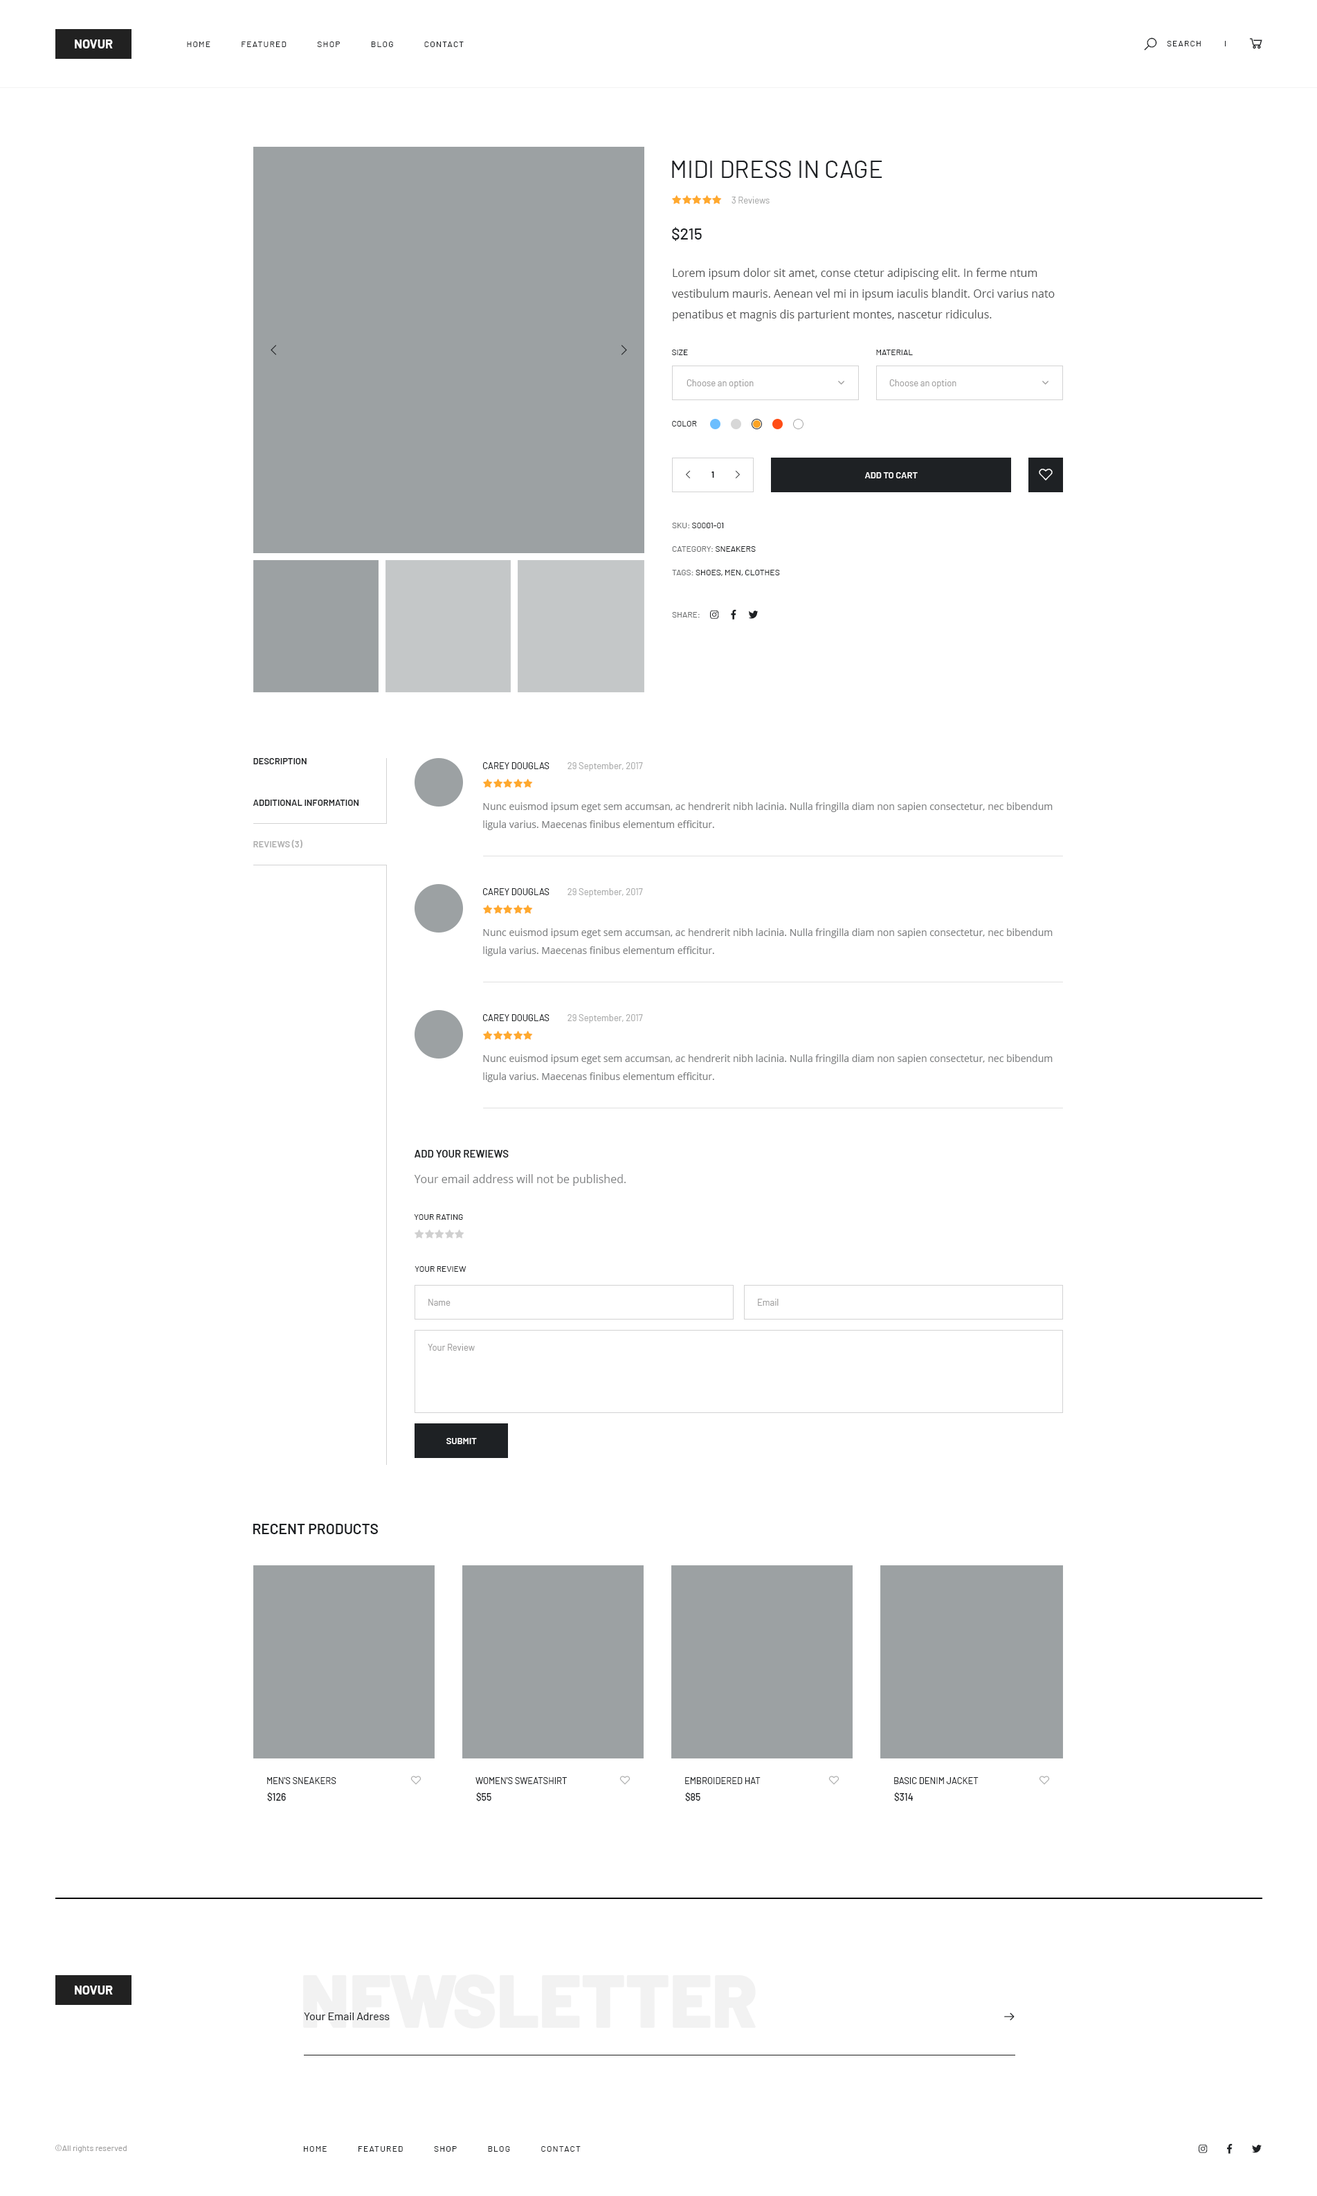
<style>
.page{position:relative;width:1317px;height:2196px;background:#ffffff}
.page>*{position:absolute;margin:0}
.t1{font:12.5px "Barlow-Bold";color:#fefefe;text-transform:uppercase}
.t2{font:8.3px "Barlow-Regular";letter-spacing:0.1em;color:#1e2124;text-transform:uppercase}
.t3{font:24.2px "Barlow-Regular";color:#1e2124;text-transform:uppercase}
.t4{font:9px "Barlow-Regular";color:#aaabab}
.t5{font:15.9px "Barlow-Medium";color:#1e2124}
.t6{font:11.1px/20.8px "OpenSans";color:#535455}
.t7{font:8.3px "Barlow-Regular";color:#1e2124;text-transform:uppercase}
.t8{font:9px "Barlow-Regular";color:#9e9d9d}
.t9{font:8.3px "Barlow-Bold";color:#1e2124;text-transform:uppercase}
.t10{font:9px "Barlow-SemiBold";color:#ffffff;text-transform:uppercase}
.t11{font:8.3px/23.5px "Barlow-Regular";color:#1e2124;text-transform:uppercase}
.t12{font:8.3px/23.5px "Barlow-Regular";color:#6e7071;text-transform:uppercase}
.t13{font:8.3px "Barlow-Regular";color:#6e7071;text-transform:uppercase}
.t14{font:9px/41.5px "Barlow-SemiBold";color:#1e2124;text-transform:uppercase}
.t15{font:9px/41.5px "Barlow-SemiBold";color:#aeaeae;text-transform:uppercase}
.t16{font:9px "Barlow-Regular";color:#1e2124;text-transform:uppercase}
.t17{font:9.7px/18px "OpenSans";color:#7f8182}
.t18{font:10.4px "Barlow-SemiBold";color:#1e2124;text-transform:uppercase}
.t19{font:11.1px "OpenSans";color:#7f8182}
.t20{font:14.5px "Barlow-SemiBold";color:#1e2124;text-transform:uppercase}
.t21{font:9.7px "Barlow-Medium";color:#1e2124}
.t22{font:74.1px "Barlow-Black";color:#f2f2f2}
.t23{font:11.1px "Barlow-Regular";color:#1e2124}
.t24{font:8.3px "Barlow-Regular";color:#9e9d9d}
</style>
<div class="page">
<p class="t1" style="left:75px;top:39px;width:38px;height:9px">novur</p>
<p class="t2" style="left:187px;top:42px;width:277px;height:5px">Home            Featured            Shop            Blog            Contact</p>
<p class="t2" style="left:1167px;top:41px;width:34px;height:5px">Search</p>
<p class="t3" style="left:672px;top:161px;width:211px;height:17px">Midi Dress in Cage</p>
<p class="t4" style="left:732px;top:197px;width:38px;height:7px">3 Reviews</p>
<p class="t5" style="left:672px;top:227px;width:30px;height:14px">$215</p>
<p class="t6" style="left:672px;top:268px;width:383px;height:53px">Lorem ipsum dolor sit amet, conse ctetur adipiscing elit. In ferme ntum    vestibulum mauris. Aenean vel mi in ipsum iaculis blandit. Orci varius nato penatibus et magnis dis parturient montes, nascetur ridiculus.</p>
<p class="t7" style="left:672px;top:350px;width:16px;height:5px">Size</p>
<p class="t7" style="left:876px;top:350px;width:37px;height:5px">Material</p>
<p class="t8" style="left:687px;top:379px;width:67px;height:9px">Choose an option</p>
<p class="t8" style="left:890px;top:379px;width:67px;height:9px">Choose an option</p>
<p class="t7" style="left:672px;top:421px;width:25px;height:5px">Color</p>
<p class="t9" style="left:712px;top:471px;width:2px;height:7px">1</p>
<p class="t10" style="left:865px;top:472px;width:53px;height:6px">Add to cart</p>
<p class="t11" style="left:672px;top:523px;width:108px;height:53px"><span class="t12">SKU: </span>S0001-01<br><span class="t12">Category: </span>Sneakers<br><span class="t12">Tags: </span>Shoes, Men, Clothes</p>
<p class="t13" style="left:672px;top:612px;width:28px;height:6px">Share:</p>
<p class="t14" style="left:253px;top:758px;width:106px;height:90px">Description<br>additional information<br><span class="t15">Reviews (3)</span></p>
<p class="t16" style="left:483px;top:762px;width:67px;height:7px">Carey Douglas</p>
<p class="t4" style="left:568px;top:762px;width:75px;height:9px">29 September, 2017</p>
<p class="t17" style="left:483px;top:802px;width:570px;height:28px">Nunc euismod ipsum eget sem accumsan, ac hendrerit nibh lacinia. Nulla fringilla diam non sapien consectetur, nec bibendum ligula varius. Maecenas finibus elementum efficitur.</p>
<p class="t16" style="left:483px;top:888px;width:67px;height:7px">Carey Douglas</p>
<p class="t4" style="left:568px;top:888px;width:75px;height:9px">29 September, 2017</p>
<p class="t17" style="left:483px;top:928px;width:570px;height:28px">Nunc euismod ipsum eget sem accumsan, ac hendrerit nibh lacinia. Nulla fringilla diam non sapien consectetur, nec bibendum ligula varius. Maecenas finibus elementum efficitur.</p>
<p class="t16" style="left:483px;top:1014px;width:67px;height:7px">Carey Douglas</p>
<p class="t4" style="left:568px;top:1014px;width:75px;height:9px">29 September, 2017</p>
<p class="t17" style="left:483px;top:1054px;width:570px;height:28px">Nunc euismod ipsum eget sem accumsan, ac hendrerit nibh lacinia. Nulla fringilla diam non sapien consectetur, nec bibendum ligula varius. Maecenas finibus elementum efficitur.</p>
<p class="t18" style="left:415px;top:1150px;width:94px;height:8px">Add Your Rewiews</p>
<p class="t19" style="left:414px;top:1174px;width:212px;height:12px">Your email address will not be published.</p>
<p class="t7" style="left:414px;top:1214px;width:49px;height:6px">Your Rating</p>
<p class="t7" style="left:415px;top:1266px;width:52px;height:6px">Your Review</p>
<p class="t8" style="left:429px;top:1299px;width:22px;height:7px">Name</p>
<p class="t8" style="left:758px;top:1299px;width:21px;height:7px">Email</p>
<p class="t8" style="left:428px;top:1344px;width:47px;height:7px">Your Review</p>
<p class="t10" style="left:447px;top:1438px;width:30px;height:6px">Submit</p>
<p class="t20" style="left:253px;top:1524px;width:125px;height:10px">Recent Products</p>
<p class="t16" style="left:267px;top:1777px;width:69px;height:7px">Men's Sneakers</p>
<p class="t16" style="left:476px;top:1777px;width:91px;height:7px">Women's Sweatshirt</p>
<p class="t16" style="left:685px;top:1777px;width:76px;height:7px">Embroidered Hat</p>
<p class="t16" style="left:894px;top:1777px;width:85px;height:7px">Basic Denim Jacket</p>
<p class="t21" style="left:267px;top:1792px;width:19px;height:9px">$126</p>
<p class="t21" style="left:476px;top:1792px;width:16px;height:9px">$55</p>
<p class="t21" style="left:685px;top:1792px;width:16px;height:9px">$85</p>
<p class="t21" style="left:894px;top:1792px;width:20px;height:9px">$314</p>
<p class="t1" style="left:75px;top:1986px;width:38px;height:9px">Novur</p>
<p class="t22" style="left:303px;top:1974px;width:453px;height:54px">NEWSLETTER</p>
<p class="t23" style="left:304px;top:2013px;width:86px;height:7px">Your Email Adress</p>
<p class="t24" style="left:55px;top:2145px;width:72px;height:7px">©All rights reserved</p>
<p class="t2" style="left:304px;top:2146px;width:277px;height:6px">Home            Featured            Shop            Blog            Contact</p>
</div>
